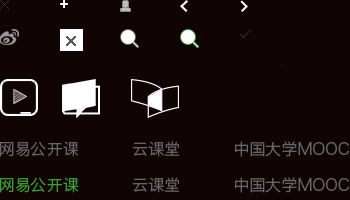
<style>
.page{position:relative;width:350px;height:200px;background:#100404}
.page>*{position:absolute;margin:0}
.t1{font:16px "HiraginoSansGB-W3";color:#666666}
.t2{font:16px "HiraginoSansGB-W3";color:#39a030}
</style>
<div class="page">
<p class="t1" style="left:0px;top:141px;width:350px;height:16px">网易公开课          云课堂          中国大学MOOC</p>
<p class="t1" style="left:0px;top:177px;width:350px;height:16px"><span class="t2">网易公开课</span>          云课堂          中国大学MOOC</p>
</div>
